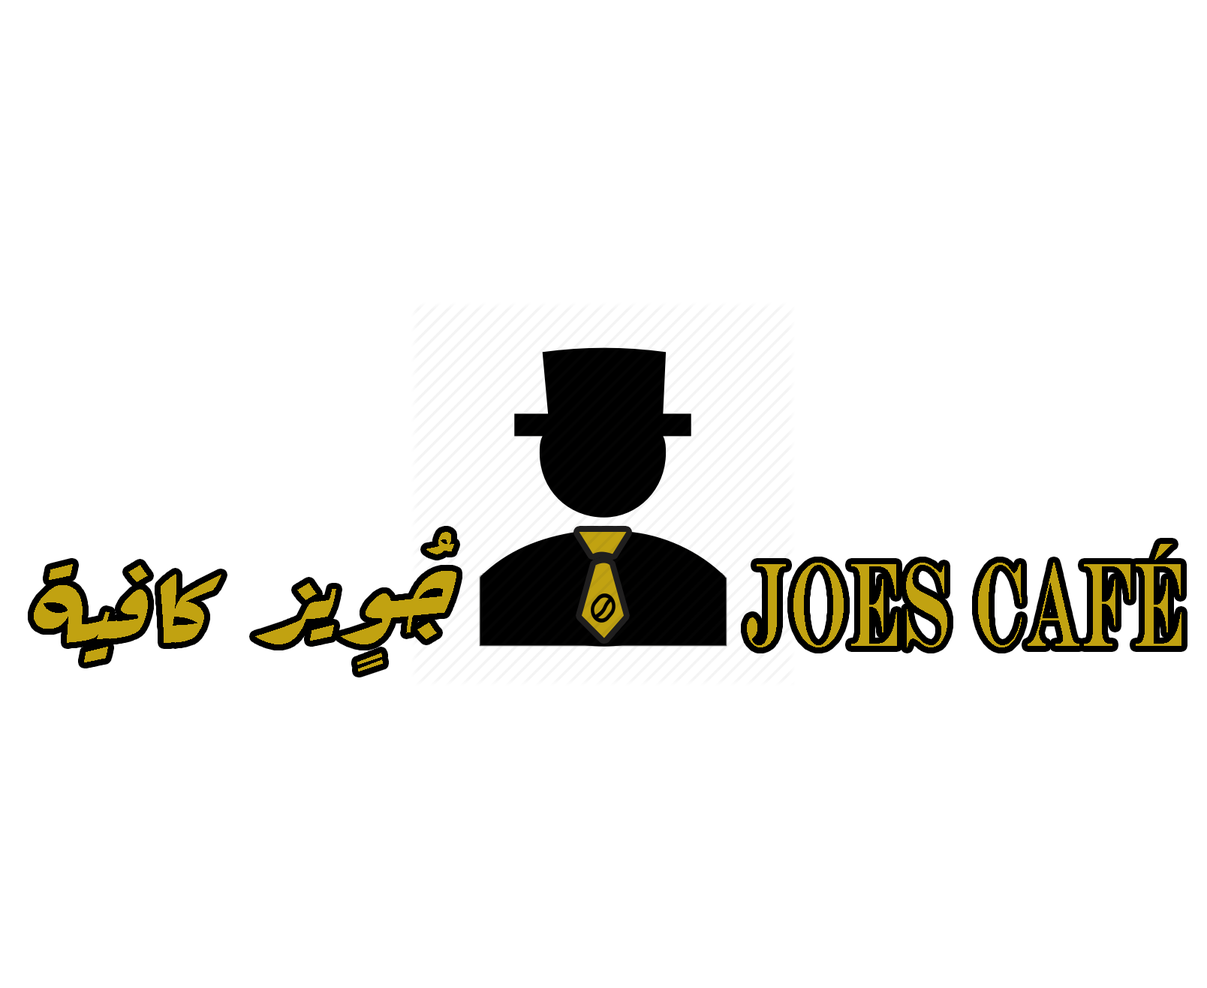
<style>
.page{position:relative;width:1207px;height:988px;background:#ffffff}
.page>*{position:absolute;margin:0}
.t1{font:115px "Rakkas-Regular";letter-spacing:0.025em;color:#c1a211;scale:1.07 1}
.t2{font:120.1px "EngraversMT";letter-spacing:0.025em;color:#c1a211;scale:0.51 1}
</style>
<div class="page">
<p class="t1" style="left:34px;top:532px;width:422px;height:140px">جُوٍيز كافية</p>
<p class="t2" style="left:747px;top:544px;width:434px;height:104px">joes café</p>
</div>
